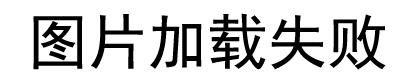
<style>
.page{position:relative;width:400px;height:80px;background:#ffffff}
.page>*{position:absolute;margin:0}
.t1{font:60px "SimHei";color:#000000}
</style>
<div class="page">
<p class="t1" style="left:33px;top:13px;width:353px;height:57px">图片加载失败</p>
</div>
